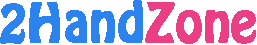
<style>
.page{position:relative;width:257px;height:45px;background:#ffffff}
.page>*{position:absolute;margin:0}
.t1{font:48px "HoboStd";color:#2d83ed;font-weight:bold}
.t2{font:48px "HoboStd";color:#ec3e84;font-weight:bold}
</style>
<div class="page">
<p class="t1" style="left:0px;top:0px;width:256px;height:44px">2Hand<span class="t2">Zone</span></p>
</div>
